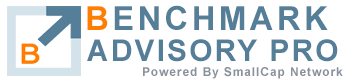
<style>
.page{position:relative;width:347px;height:80px;background:#ffffff}
.page>*{position:absolute;margin:0}
.t1{font:33px "Arial-BoldMT";letter-spacing:0.1em;color:#557f98}
.t2{font:33px "Arial-BoldMT";letter-spacing:0.1em;color:#fe7e00}
.t3{font:30px "Arial-BoldMT";letter-spacing:0.07em;color:#557f98}
.t4{font:12px "Arial-BoldMT";letter-spacing:0.075em;color:#89919d}
</style>
<div class="page">
<p class="t1" style="left:87px;top:5px;width:241px;height:25px"><span class="t2">B</span>ENCHMARK</p>
<p class="t3" style="left:87px;top:39px;width:251px;height:23px">ADVISORY PRO</p>
<p class="t4" style="left:143px;top:67px;width:200px;height:12px">Powered By SmallCap Network</p>
</div>
